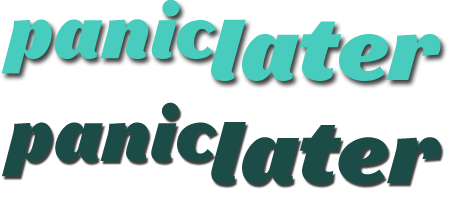
<style>
.page{position:relative;width:449px;height:200px;background:#ffffff}
.page>*{position:absolute;margin:0}
.t1{font:69.4px "Leviathan-HTF-Black-Italic";color:#47ccbd}
.t2{font:83.3px "Leviathan-HTF-Black-Italic";color:#47ccbd}
.t3{font:69.4px "Leviathan-HTF-Black-Italic";color:#1b4c47}
.t4{font:83.3px "Leviathan-HTF-Black-Italic";color:#1b4c47}
</style>
<div class="page">
<p class="t1" style="left:1px;top:0px;width:440px;height:81px">panic<span class="t2">later</span></p>
<p class="t3" style="left:2px;top:102px;width:439px;height:83px">panic<span class="t4">later</span></p>
</div>
